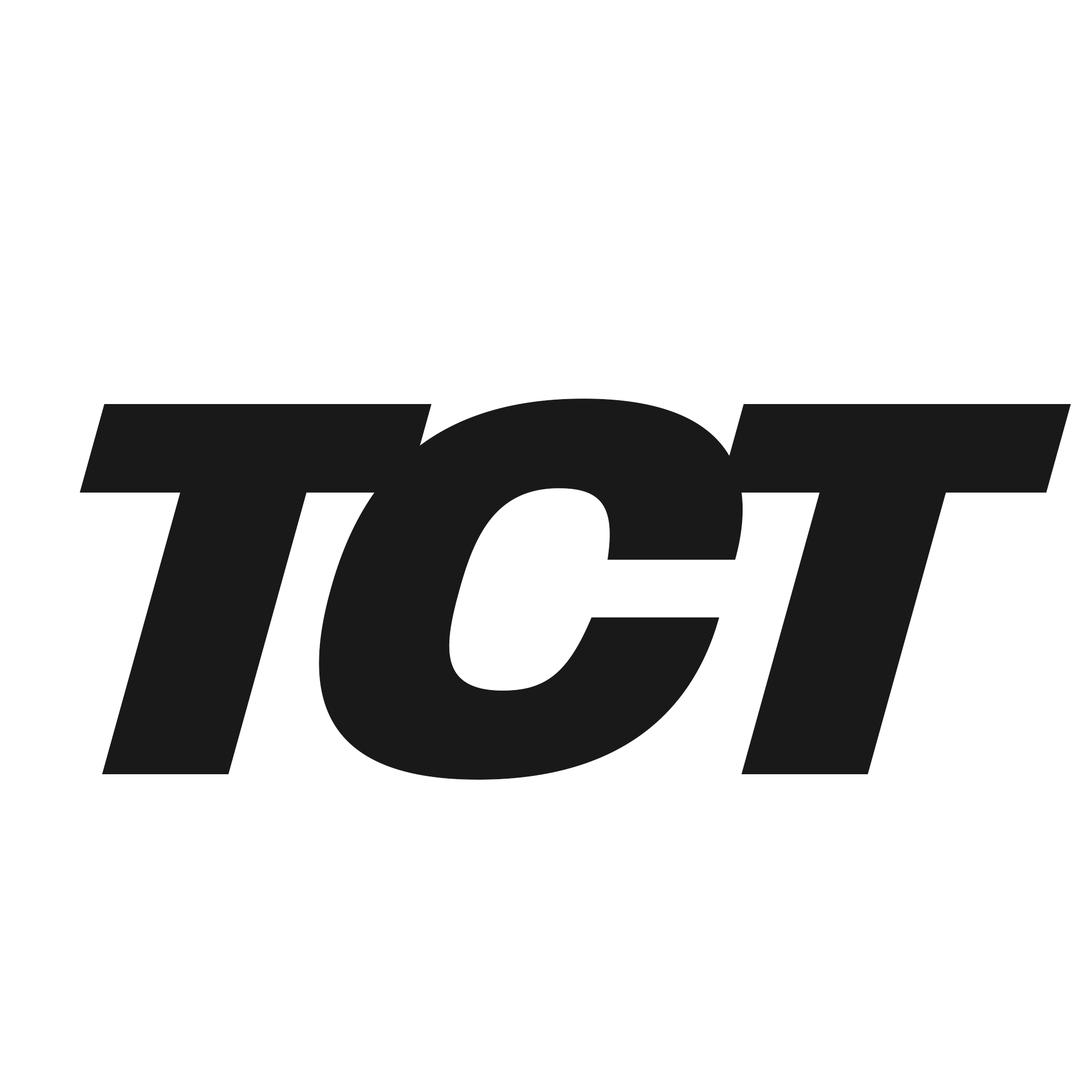
<style>
.page{position:relative;width:1092px;height:1092px;background:#ffffff}
.page>*{position:absolute;margin:0}
.t1{font:600.6px "Paralucent-Heavy";letter-spacing:-0.08em;color:#191919;scale:1.11 1}
</style>
<div class="page">
<p class="t1" style="left:80px;top:399px;width:991px;height:381px">TCT</p>
</div>
